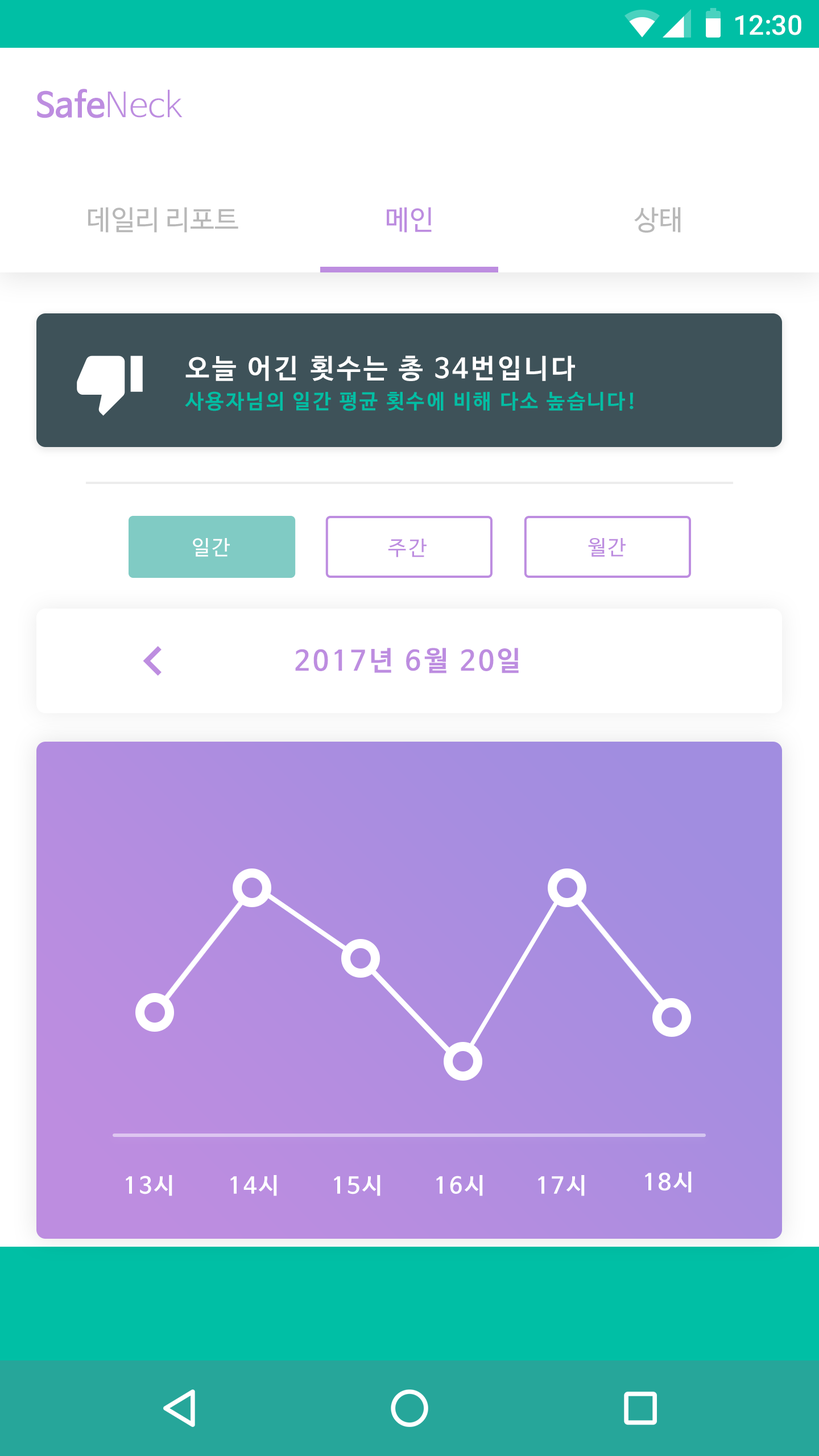
<style>
.page{position:relative;width:819px;height:1456px;background:#ffffff}
.page>*{position:absolute;margin:0}
.t1{font:27.3px "Roboto-Medium";color:#ffffff}
.t2{font:34.1px "NanumBarunGothicBold";color:#bd8de0}
.t3{font:34.1px "NanumBarunGothicLight";color:#bd8de0}
.t4{font:27.3px "NanumBarunGothic";color:#b8b8b8}
.t5{font:27.3px "NanumBarunGothic";color:#bd8de0}
.t6{font:26.9px "NanumBarunGothicBold";letter-spacing:0.1em;color:#ffffff}
.t7{font:20.3px "NanumBarunGothicBold";letter-spacing:0.1em;color:#00bea4}
.t8{font:20.5px "NanumBarunGothic";letter-spacing:0.1em;color:#ffffff}
.t9{font:20.5px "NanumBarunGothic";letter-spacing:0.1em;color:#bd8de0}
.t10{font:27.3px "NanumBarunGothicBold";letter-spacing:0.1em;color:#bd8de0}
.t11{font:22.5px "NanumBarunGothicBold";letter-spacing:0.1em;color:#ffffff}
</style>
<div class="page">
<p class="t1" style="left:735px;top:15px;width:66px;height:20px">12:30</p>
<p class="t2" style="left:37px;top:89px;width:146px;height:29px">Safe<span class="t3">Neck</span></p>
<p class="t4" style="left:88px;top:207px;width:150px;height:26px">데일리 리포트</p>
<p class="t5" style="left:387px;top:207px;width:45px;height:26px">메인</p>
<p class="t4" style="left:634px;top:207px;width:47px;height:26px">상태</p>
<p class="t6" style="left:185px;top:355px;width:390px;height:26px">오늘 어긴 횟수는 총 34번입니다</p>
<p class="t7" style="left:185px;top:391px;width:449px;height:20px">사용자님의 일간 평균 횟수에 비해 다소 높습니다!</p>
<p class="t8" style="left:193px;top:538px;width:37px;height:19px">일간</p>
<p class="t9" style="left:388px;top:539px;width:39px;height:18px">주간</p>
<p class="t9" style="left:588px;top:538px;width:38px;height:19px">월간</p>
<p class="t10" style="left:295px;top:648px;width:224px;height:25px">2017년 6월 20일</p>
<p class="t11" style="left:126px;top:1175px;width:46px;height:21px">13시</p>
<p class="t11" style="left:230px;top:1175px;width:47px;height:21px">14시</p>
<p class="t11" style="left:334px;top:1175px;width:46px;height:21px">15시</p>
<p class="t11" style="left:436px;top:1175px;width:47px;height:21px">16시</p>
<p class="t11" style="left:538px;top:1175px;width:47px;height:21px">17시</p>
<p class="t11" style="left:645px;top:1172px;width:47px;height:21px">18시</p>
</div>
